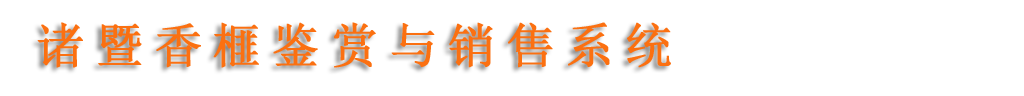
<style>
.page{position:relative;width:1024px;height:96px;background:#ffffff}
.page>*{position:absolute;margin:0}
.t1{font:48px "SimSun";letter-spacing:0.2em;color:#fb7011;font-weight:bold}
</style>
<div class="page">
<p class="t1" style="left:37px;top:22px;width:634px;height:46px">诸暨香榧鉴赏与销售系统</p>
</div>
